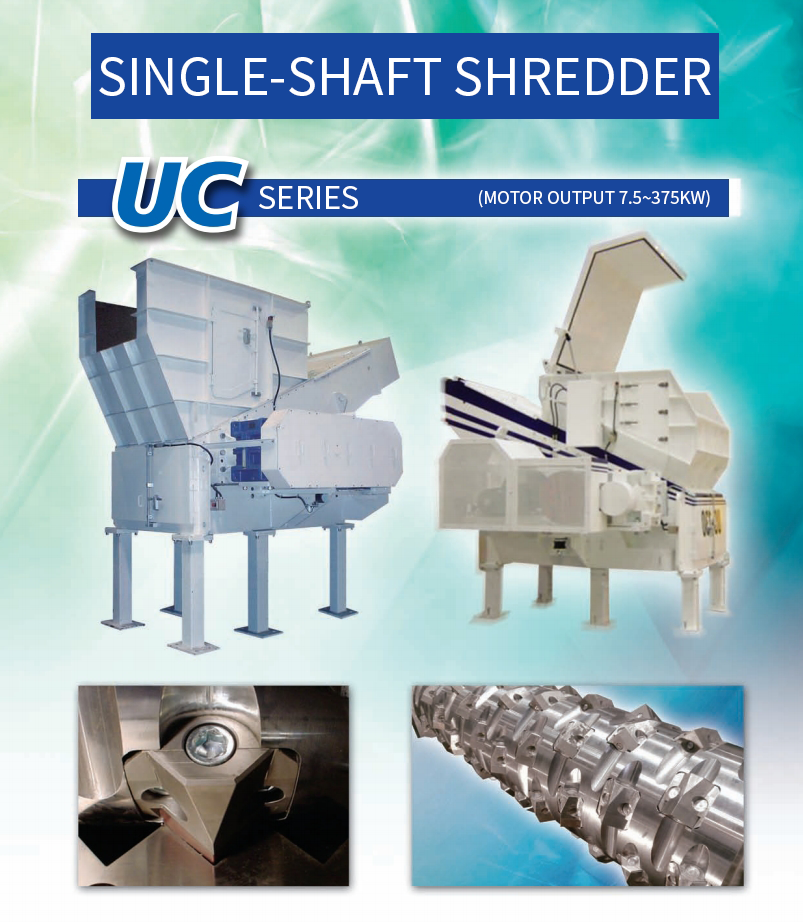
<style>
.page{position:relative;width:803px;height:922px}
.page>*{position:absolute;margin:0}
.t1{font:50.4px "NotoSansCJKkr-Regular";color:#ffffff;text-transform:uppercase}
.t2{font:30.9px "NotoSansCJKkr-Regular";color:#ffffff;text-transform:uppercase}
.t3{font:16.9px "NotoSansCJKkr-Regular";color:#ffffff;text-transform:uppercase}
</style>
<div class="page">
<p class="t1" style="left:99px;top:57px;width:612px;height:39px">Single-shaft Shredder</p>
<p class="t2" style="left:259px;top:186px;width:99px;height:23px">series</p>
<p class="t3" style="left:479px;top:190px;width:231px;height:18px">(Motor output 7.5~375kw)</p>
</div>
